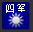
<style>
.page{position:relative;width:33px;height:32px;background:#000090}
.page>*{position:absolute;margin:0}
.t1{font:10.4px "SimSun";color:#ffffff}
</style>
<div class="page">
<p class="t1" style="left:6px;top:4px;width:19px;height:9px">四军</p>
</div>
